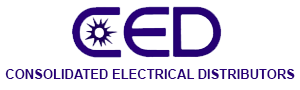
<style>
.page{position:relative;width:300px;height:90px;background:#ffffff}
.page>*{position:absolute;margin:0}
.t1{font:13px "Arial-BoldMT";color:#290078}
</style>
<div class="page">
<p class="t1" style="left:5px;top:69px;width:290px;height:10px">CONSOLIDATED ELECTRICAL DISTRIBUTORS</p>
</div>
